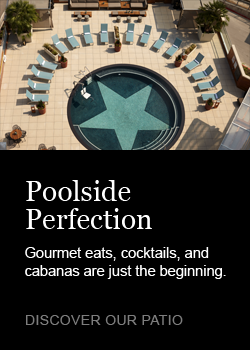
<style>
.page{position:relative;width:250px;height:350px;background:#000000}
.page>*{position:absolute;margin:0}
.t1{font:28.2px/28px "Georgia";color:#ffffff}
.t2{font:14.5px/18px "ArialMT";color:#ffffff}
.t3{font:14px "ArialMT";letter-spacing:0.025em;color:#7d7d7d;text-transform:uppercase}
</style>
<div class="page">
<p class="t1" style="left:26px;top:180px;width:126px;height:49px">Poolside<br>Perfection</p>
<p class="t2" style="left:25px;top:247px;width:201px;height:32px">Gourmet eats, cocktails, and cabanas are just the beginning.</p>
<p class="t3" style="left:26px;top:315px;width:157px;height:10px">Discover our patio</p>
</div>
